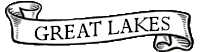
<style>
.page{position:relative;width:204px;height:52px;background:#ffffff}
.page>*{position:absolute;margin:0}
.t1{font:24px "Perpetua";color:#000000}
</style>
<div class="page">
<p class="t1" style="left:34px;top:16px;width:136px;height:25px">GREAT LAKES</p>
</div>
